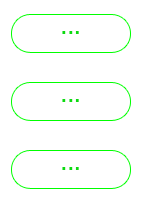
<style>
.page{position:relative;width:146px;height:204px;background:#ffffff}
.page>*{position:absolute;margin:0}
.t1{font:24px "HelveticaNeue";color:#0cda10}
</style>
<div class="page">
<p class="t1" style="left:62px;top:31px;width:17px;height:3px">...</p>
<p class="t1" style="left:62px;top:99px;width:17px;height:3px">...</p>
<p class="t1" style="left:62px;top:167px;width:17px;height:3px">...</p>
</div>
